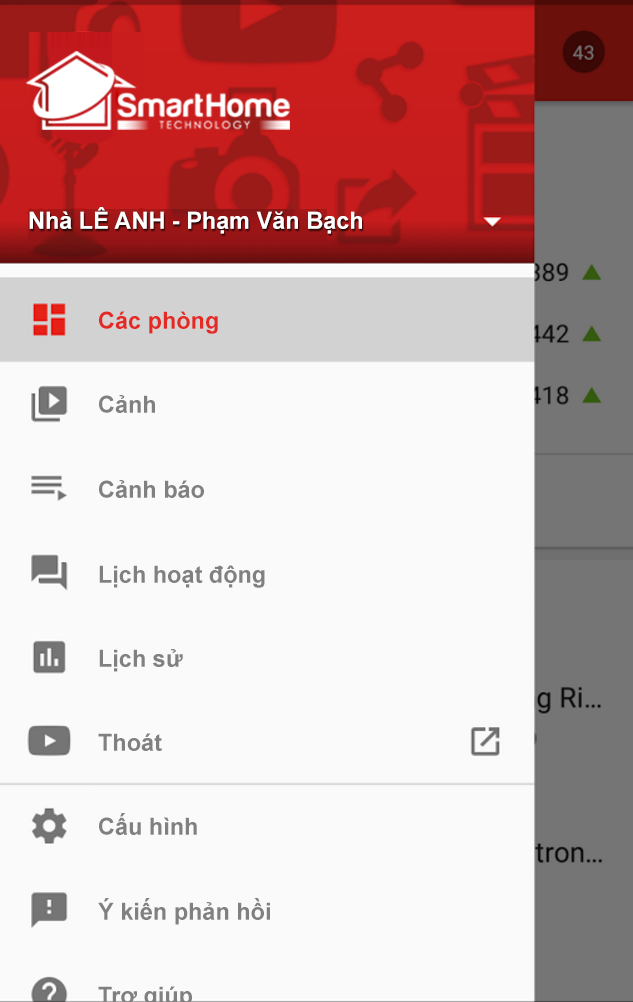
<style>
.page{position:relative;width:633px;height:1002px;background:#fafafa}
.page>*{position:absolute;margin:0}
.t1{font:23.5px "Arial-BoldMT";color:#ffffff}
.t2{font:23.5px "Arial-BoldMT";color:#e42a25}
.t3{font:23.5px "Arial-BoldMT";color:#808080}
</style>
<div class="page">
<p class="t1" style="left:29px;top:207px;width:333px;height:27px">Nhà LÊ ANH - Phạm Văn Bạch</p>
<p class="t2" style="left:99px;top:311px;width:119px;height:23px">Các phòng</p>
<p class="t3" style="left:99px;top:395px;width:56px;height:18px">Cảnh</p>
<p class="t3" style="left:99px;top:480px;width:105px;height:18px">Cảnh báo</p>
<p class="t3" style="left:99px;top:565px;width:166px;height:23px">Lịch hoạt động</p>
<p class="t3" style="left:99px;top:649px;width:84px;height:23px">Lịch sử</p>
<p class="t3" style="left:98px;top:733px;width:64px;height:18px">Thoát</p>
<p class="t3" style="left:99px;top:813px;width:98px;height:22px">Cấu hình</p>
<p class="t3" style="left:98px;top:898px;width:172px;height:27px">Ý kiến phản hồi</p>
</div>
